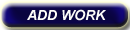
<style>
.page{position:relative;width:130px;height:30px}
.page>*{position:absolute;margin:0}
.t1{font:14px "Arial-BoldItalicMT";color:#fcfbf9}
</style>
<div class="page">
<p class="t1" style="left:27px;top:9px;width:79px;height:12px">ADD WORK</p>
</div>
